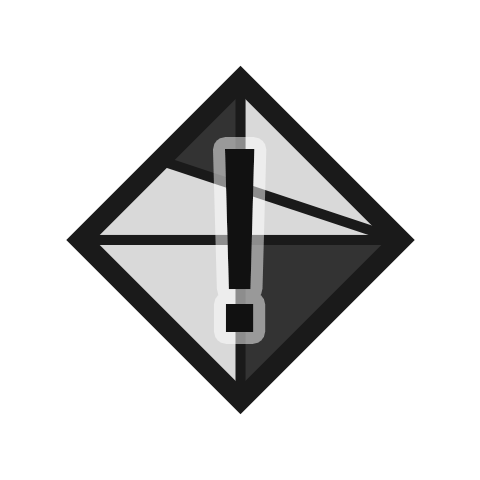
<style>
.page{position:relative;width:480px;height:480px;background:#ffffff}
.page>*{position:absolute;margin:0}
.t1{font:240px "AgencyFB-Bold";color:#111111}
</style>
<div class="page">
<p class="t1" style="left:225px;top:149px;width:30px;height:183px">!</p>
</div>
